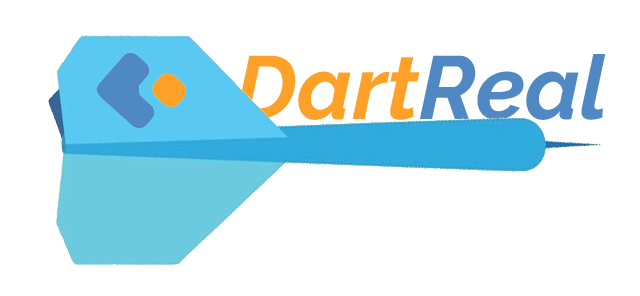
<style>
.page{position:relative;width:640px;height:296px;background:#ffffff}
.page>*{position:absolute;margin:0}
.t1{font:89px "Raleway-BoldItalic";color:#fda128}
.t2{font:89px "Raleway-BoldItalic";color:#5088c3}
</style>
<div class="page">
<p class="t1" style="left:236px;top:54px;width:370px;height:66px">Dart<span class="t2">Real</span></p>
</div>
